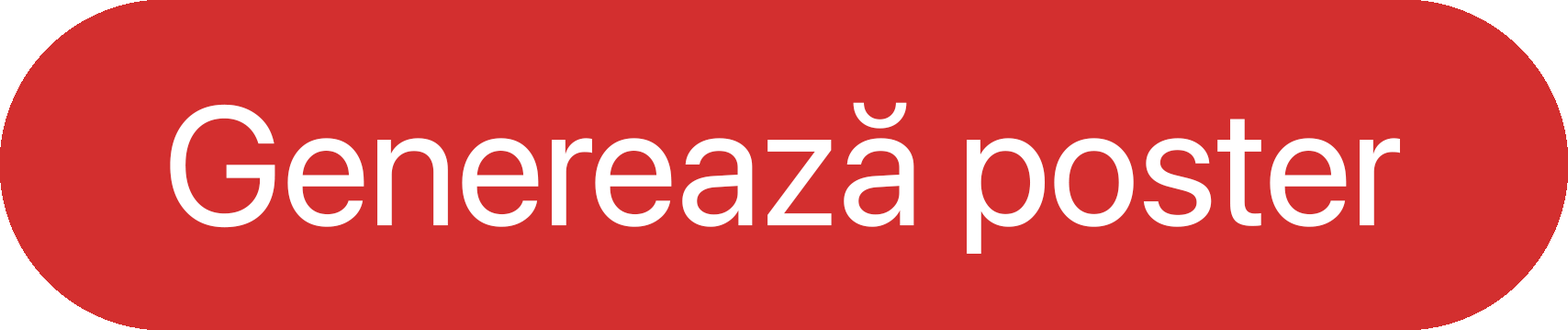
<style>
.page{position:relative;width:1568px;height:330px;background:#d32f2f}
.page>*{position:absolute;margin:0}
.t1{font:167.9px "SFProDisplay-Regular";color:#ffffff}
</style>
<div class="page">
<p class="t1" style="left:170px;top:102px;width:1230px;height:151px">Generează poster</p>
</div>
